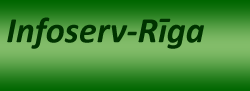
<style>
.page{position:relative;width:250px;height:91px}
.page>*{position:absolute;margin:0}
.t1{font:36px "Calibri-BoldItalic";color:#003300}
</style>
<div class="page">
<p class="t1" style="left:7px;top:17px;width:197px;height:32px">Infoserv-Rīga</p>
</div>
